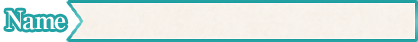
<style>
.page{position:relative;width:418px;height:42px}
.page>*{position:absolute;margin:0}
.t1{font:25px "RyuminPro-ExBold";letter-spacing:-0.08em;color:#ffffff}
</style>
<div class="page">
<p class="t1" style="left:6px;top:10px;width:60px;height:20px">Name</p>
</div>
